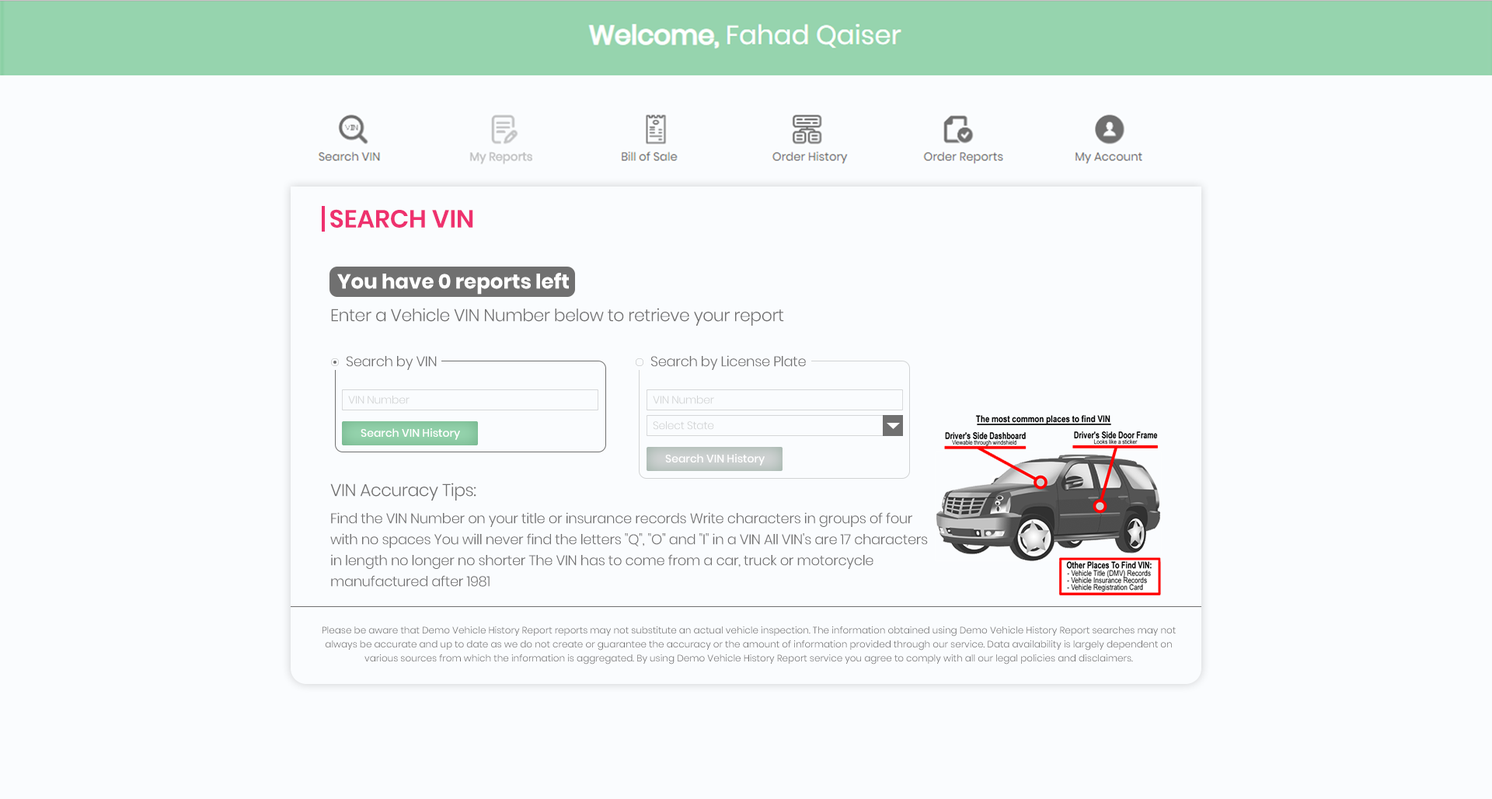
<style>
.page{position:relative;width:1492px;height:799px;background:#fafcfe}
.page>*{position:absolute;margin:0}
.t1{font:24.9px "Poppins-SemiBold";color:#ee316e}
.t2{font:20.2px "Poppins-Bold";color:#ffffff}
.t3{font:17.1px "Poppins-Light";letter-spacing:-0.02em;color:#707070}
.t4{font:14px "Poppins-Light";letter-spacing:-0.02em;color:#707070}
.t5{font:10.9px "Poppins-Light";letter-spacing:-0.02em;color:#d1d3d4}
.t6{font:10.9px "Poppins-Medium";color:#ffffff}
.t7{font:14px/21px "Poppins-Light";letter-spacing:-0.02em;color:#707070}
.t8{font:17.1px/21px "Poppins-Light";letter-spacing:-0.02em;color:#707070}
.t9{font:14px/6.2px "Poppins-Light";letter-spacing:-0.02em;color:#707070}
.t10{font:9.3px/14px "Poppins-Light";color:#707070}
</style>
<div class="page">
<p class="t1" style="left:330px;top:209px;width:143px;height:19px">SEARCH VIN</p>
<p class="t2" style="left:337px;top:273px;width:232px;height:22px">You have 0 reports left</p>
<p class="t3" style="left:331px;top:308px;width:453px;height:18px">Enter a Vehicle VIN Number below to retrieve your report</p>
<p class="t4" style="left:347px;top:356px;width:90px;height:14px">Search by VIN</p>
<p class="t4" style="left:651px;top:355px;width:155px;height:15px">Search by License Plate</p>
<p class="t5" style="left:348px;top:396px;width:62px;height:8px">VIN Number</p>
<p class="t5" style="left:653px;top:396px;width:61px;height:8px">VIN Number</p>
<p class="t5" style="left:653px;top:421px;width:61px;height:9px">Select State</p>
<p class="t6" style="left:361px;top:428px;width:99px;height:12px">Search VIN History</p>
<p class="t6" style="left:665px;top:454px;width:100px;height:12px">Search VIN History</p>
<p class="t7" style="left:330px;top:483px;width:598px;height:104px"><span class="t8">VIN Accuracy Tips:<br><br></span><span class="t9">Find the VIN Number on your title or insurance records Write characters in groups of four </span>with no spaces You will never find the letters "Q", "O" and "I" in a VIN All VIN's are 17 characters in length no longer no shorter The VIN has to come from a car, truck or motorcycle manufactured after 1981</p>
<p class="t10" style="left:323px;top:626px;width:853px;height:39px;text-align:center">Please be aware that Demo Vehicle History Report reports may not substitute an actual vehicle inspection. The information obtained using Demo Vehicle History Report searches may not always be accurate and up to date as we do not create or guarantee the accuracy or the amount of information provided through our service. Data availability is largely dependent on various sources from which the information is aggregated. By using Demo Vehicle History Report service you agree to comply with all our legal policies and disclaimers.</p>
</div>
